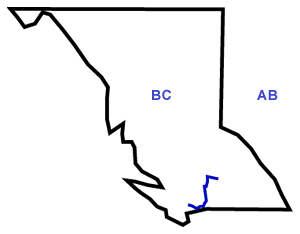
<style>
.page{position:relative;width:300px;height:234px;background:#ffffff}
.page>*{position:absolute;margin:0}
.t1{font:14px "Arial-BoldMT";letter-spacing:0.05em;color:#3e45cf}
</style>
<div class="page">
<p class="t1" style="left:152px;top:89px;width:19px;height:11px">BC</p>
<p class="t1" style="left:257px;top:90px;width:21px;height:10px">AB</p>
</div>
